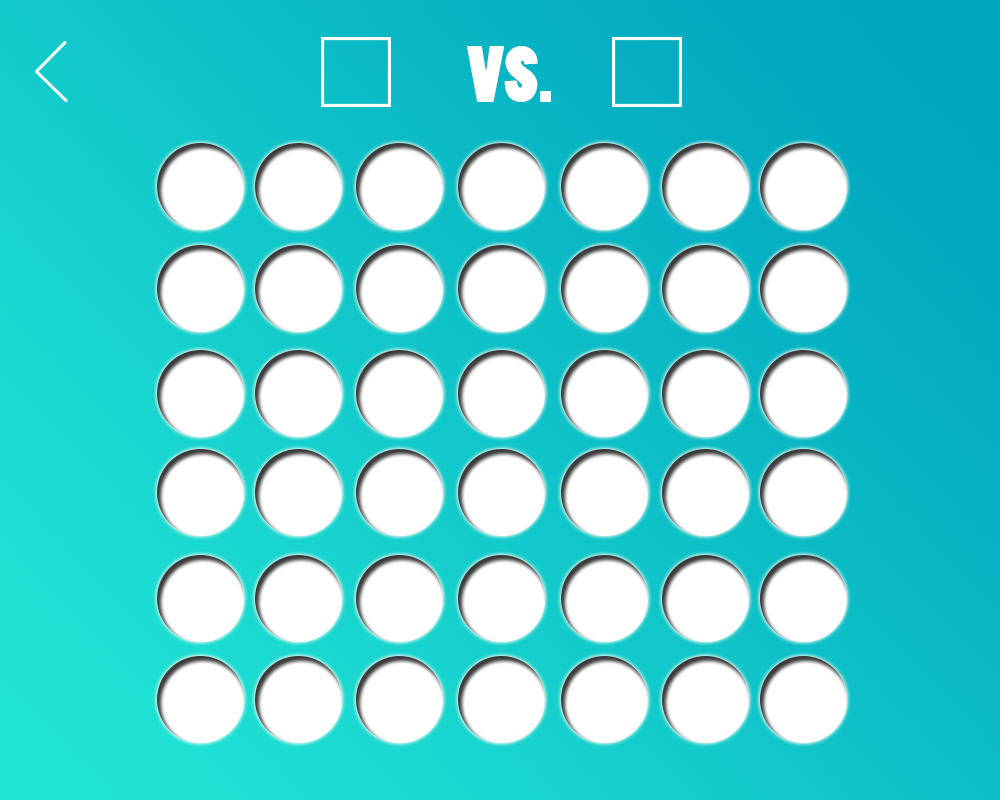
<style>
.page{position:relative;width:1000px;height:800px;background:#ffffff}
.page>*{position:absolute;margin:0}
.t1{font:75px "PoplarStd";color:#ffffff}
</style>
<div class="page">
<p class="t1" style="left:467px;top:46px;width:84px;height:56px">VS.</p>
</div>
